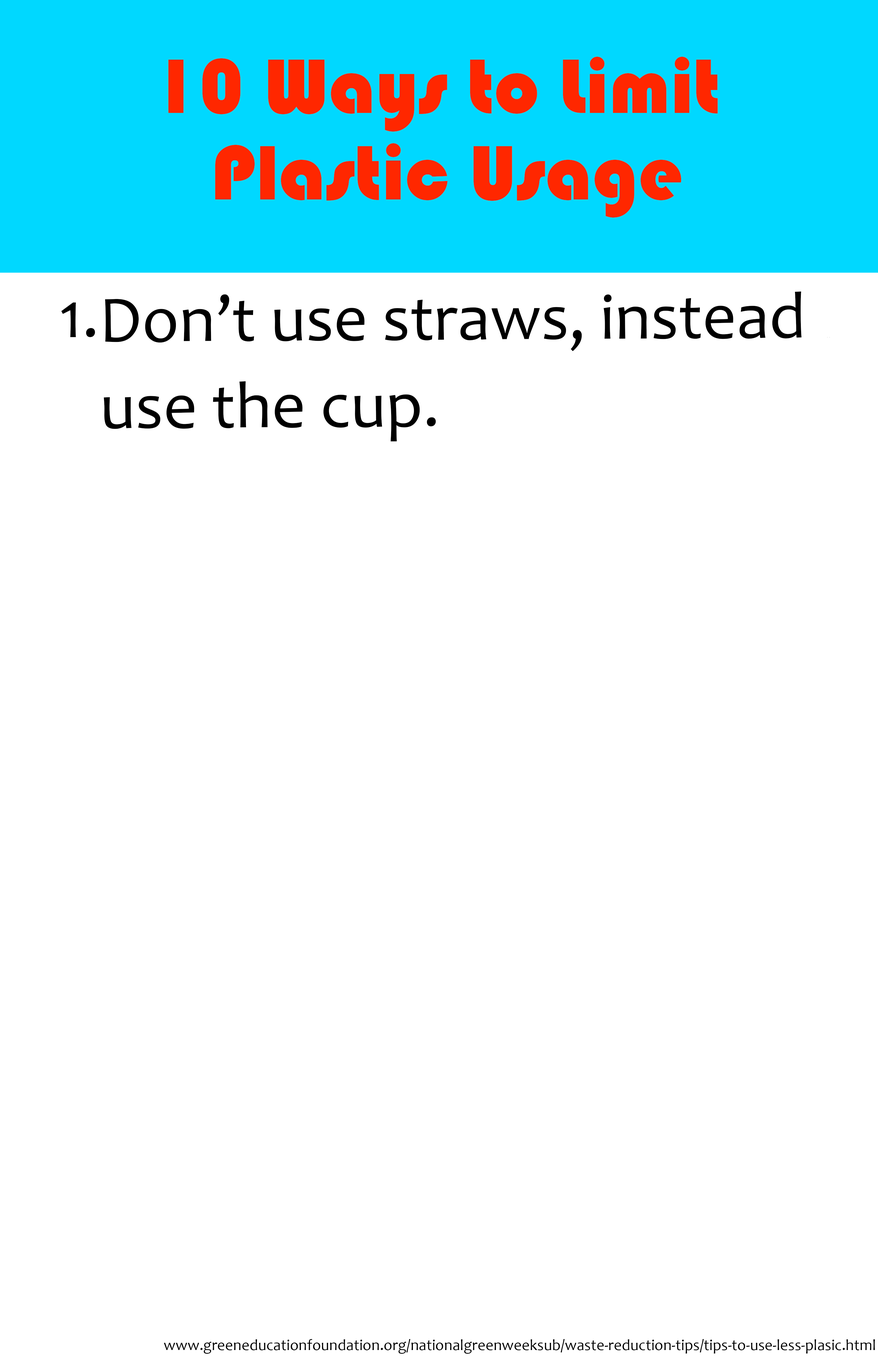
<style>
.page{position:relative;width:878px;height:1358px;background:#ffffff}
.page>*{position:absolute;margin:0}
.t1{font:79.9px/86.5px "Bauhaus93";color:#ff2700}
.t2{font:66.5px/86.5px "Candara";color:#000000}
.t3{font:1.1px/86.5px "Candara";color:#000000}
.t4{font:66.5px "Candara";color:#000000}
.t5{font:15.5px "Candara";color:#000000}
</style>
<div class="page">
<p class="t1" style="left:168px;top:57px;width:550px;height:160px;text-align:center">10 Ways to Limit<br> Plastic Usage</p>
<p class="t2" style="left:104px;top:291px;width:726px;height:150px">Don’t use straws, instead  <span class="t3">.        .</span>      use the cup.</p>
<p class="t4" style="left:61px;top:302px;width:34px;height:35px">1.</p>
<p class="t5" style="left:164px;top:1339px;width:711px;height:14px">www.greeneducationfoundation.org/nationalgreenweeksub/waste-reduction-tips/tips-to-use-less-plasic.html</p>
</div>
